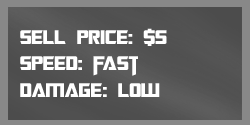
<style>
.page{position:relative;width:250px;height:125px}
.page>*{position:absolute;margin:0}
.t1{font:22px "TransformersMovie";color:#ffffff}
.t2{font:22px "TransformersMovie";letter-spacing:0.02em;color:#ffffff}
.t3{font:22px "TransformersMovie";letter-spacing:-0.1em;color:#ffffff}
</style>
<div class="page">
<p class="t1" style="left:20px;top:28px;width:147px;height:69px">sell p<span class="t2">ri</span>ce: $5<br>spee<span class="t2">d</span>: <span class="t3">f</span>ast<br>dama<span class="t2">ge</span>: low</p>
</div>
